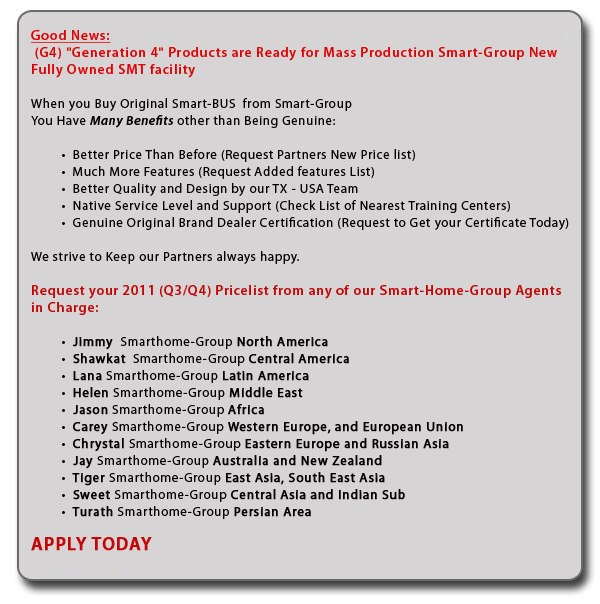
<style>
.page{position:relative;width:600px;height:604px;background:#d6d4d5}
.page>*{position:absolute;margin:0}
.t1{font:13px/17px "MyriadPro-Regular";letter-spacing:0.05em;color:#070000}
.t2{font:14px/17px "MyriadPro-Semibold";letter-spacing:0.05em;color:#de0303;text-decoration:underline}
.t3{font:14px/17px "MyriadPro-Semibold";letter-spacing:0.05em;color:#de0303}
.t4{font:13px/17px "MyriadPro-SemiboldIt";letter-spacing:0.05em;color:#070000}
.t5{font:14px/17px "MyriadPro-Semibold";letter-spacing:0.05em;color:#c20505}
.t6{font:13px/17px "MyriadPro-Regular";letter-spacing:0.05em;color:#070000;font-weight:bold}
.t7{font:18px/17px "MyriadPro-Semibold";letter-spacing:0.05em;color:#c60606;font-weight:bold}
</style>
<div class="page">
<p class="t1" style="left:31px;top:30px;width:538px;height:521px"><span class="t2">Good News:<br></span><span class="t3"> (G4) "Generation 4" Products are Ready for Mass Production Smart-Group New Fully Owned SMT facility<br> <br></span>When you Buy Original Smart-BUS  from Smart-Group<br>You Have <span class="t4">Many Benefits </span>other than Being Genuine:<br><br>         •  Better Price Than Before (Request Partners New Price list)<br>         •  Much More Features (Request Added features List)<br>         •  Better Quality and Design by our TX - USA Team<br>         •  Native Service Level and Support (Check List of Nearest Training Centers)<br>         •  Genuine Original Brand Dealer Certification (Request to Get your Certificate Today)<br> <br>We strive to Keep our Partners always happy.<br><br><span class="t5">Request your 2011 (Q3/Q4) Pricelist from any of our Smart-Home-Group Agents in Charge:<br></span><br>         •  <span class="t6">Jimmy </span> Smarthome-Group <span class="t6">North America  <br></span>         •  <span class="t6">Shawkat</span>  Smarthome-Group <span class="t6">Central America<br></span>         •  <span class="t6">Lana</span> Smarthome-Group <span class="t6">Latin America<br></span>         •  <span class="t6">Helen</span> Smarthome-Group<span class="t6"> Middle East<br></span>         • <span class="t6"> Jason</span> Smarthome-Group <span class="t6">Africa<br></span>         •  <span class="t6">Carey</span> Smarthome-Group <span class="t6">Western Europe, and European Union<br></span>         •  <span class="t6">Chrystal </span>Smarthome-Group <span class="t6">Eastern Europe and Russian Asia<br></span>         • <span class="t6"> Jay </span>Smarthome-Group <span class="t6">Australia and New Zealand<br></span>         •  <span class="t6">Tiger </span>Smarthome-Group <span class="t6">East Asia, South East Asia<br></span>         •  <span class="t6">Sweet </span>Smarthome-Group <span class="t6">Central Asia and Indian Sub<br></span>         •  <span class="t6">Turath </span>Smarthome-Group <span class="t6">Persian Area<br><br></span><span class="t7">APPLY TODAY</span></p>
</div>
